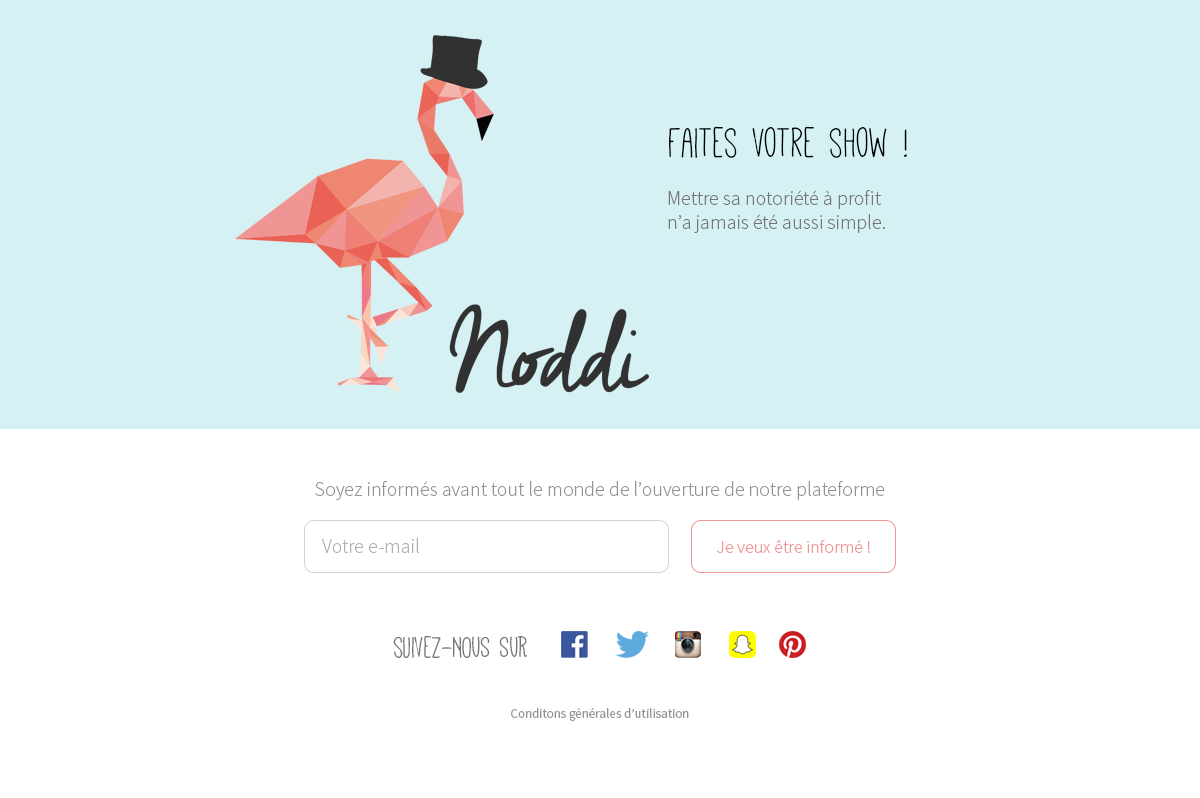
<style>
.page{position:relative;width:1200px;height:798px;background:#d5f1f3}
.page>*{position:absolute;margin:0}
.t1{font:47px "Mathlete-Skinny";color:#000000}
.t2{font:20px "SourceSansPro-Light";color:#777676}
.t3{font:20px "SourceSansPro-Light";color:#949393}
.t4{font:20px "SourceSansPro-Light";color:#b1b0b0}
.t5{font:18px "SourceSansPro-Light";color:#f09494}
.t6{font:33px "Mathlete-Skinny";color:#767575}
.t7{font:13px "SourceSansPro-Regular";color:#949393}
</style>
<div class="page">
<p class="t1" style="left:669px;top:126px;width:238px;height:32px">Faites votre show !</p>
<p class="t2" style="left:668px;top:190px;width:217px;height:43px">Mettre sa notoriété à profit<br>n’a jamais été aussi simple.</p>
<p class="t3" style="left:315px;top:481px;width:570px;height:19px">Soyez informés avant tout le monde de l’ouverture de notre plateforme</p>
<p class="t4" style="left:322px;top:538px;width:97px;height:15px">Votre e-mail</p>
<p class="t5" style="left:717px;top:540px;width:153px;height:13px">Je veux être informé !</p>
<p class="t6" style="left:393px;top:636px;width:134px;height:22px">suivez-NOUS SUR</p>
<p class="t7" style="left:511px;top:708px;width:178px;height:13px">Conditons générales d’utilisation</p>
</div>
